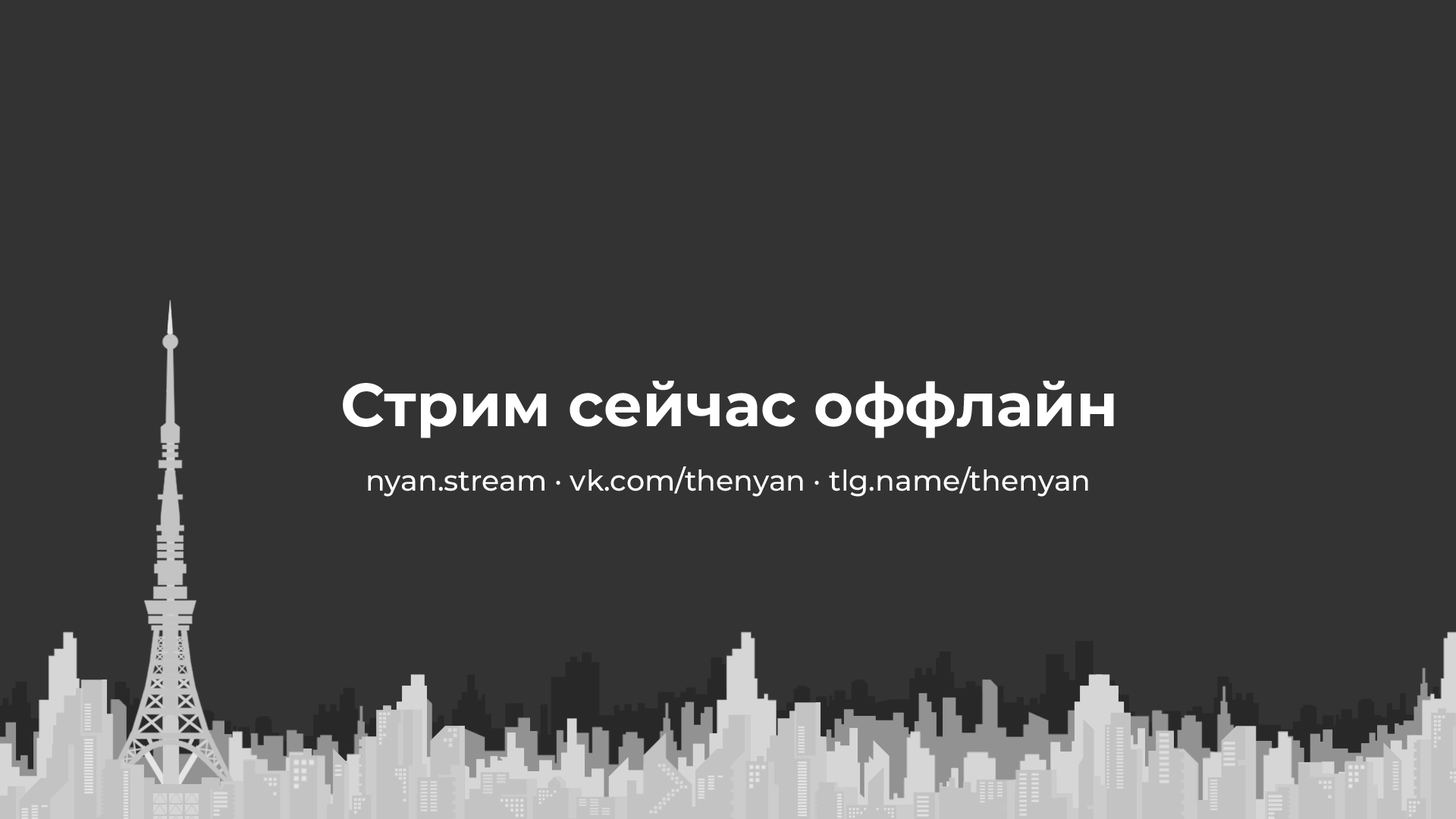
<style>
.page{position:relative;width:1456px;height:819px;background:#333333}
.page>*{position:absolute;margin:0}
.t1{font:60.7px "Montserrat-Bold";color:#ffffff}
.t2{font:28.8px "Montserrat-Medium";color:#ffffff}
</style>
<div class="page">
<p class="t1" style="left:343px;top:381px;width:771px;height:57px">Стрим сейчас оффлайн</p>
<p class="t2" style="left:368px;top:466px;width:720px;height:31px">nyan.stream · vk.com/thenyan · tlg.name/thenyan</p>
</div>
